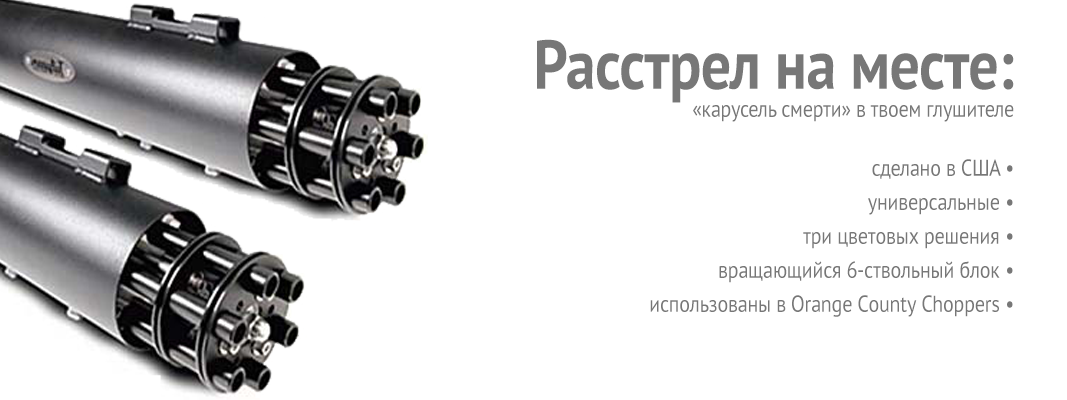
<style>
.page{position:relative;width:1067px;height:400px;background:#ffffff}
.page>*{position:absolute;margin:0}
.t1{font:23px/34px "PTSans-Regular";letter-spacing:-0.01em;color:#777777;scale:0.87 1}
.t2{font:69px/15px "PTSans-Bold";letter-spacing:-0.01em;color:#777777;scale:0.87 1}
.t3{font:23px/14px "PTSans-Regular";letter-spacing:-0.01em;color:#777777;scale:0.87 1}
.t4{font:23px/25px "PTSans-Regular";letter-spacing:-0.01em;color:#777777;scale:0.87 1}
</style>
<div class="page">
<p class="t1" style="left:537px;top:39px;width:477px;height:278px;text-align:right"><span class="t2">Расстрел на месте:<br></span><span class="t3"><br>«карусель смерти» в твоем глушителе<br></span><span class="t4"><br>сделано в США </span>•<br>универсальные •<br>три цветовых решения •<br>вращающийся 6-ствольный блок •<br>использованы в Orange County Choppers •</p>
</div>
